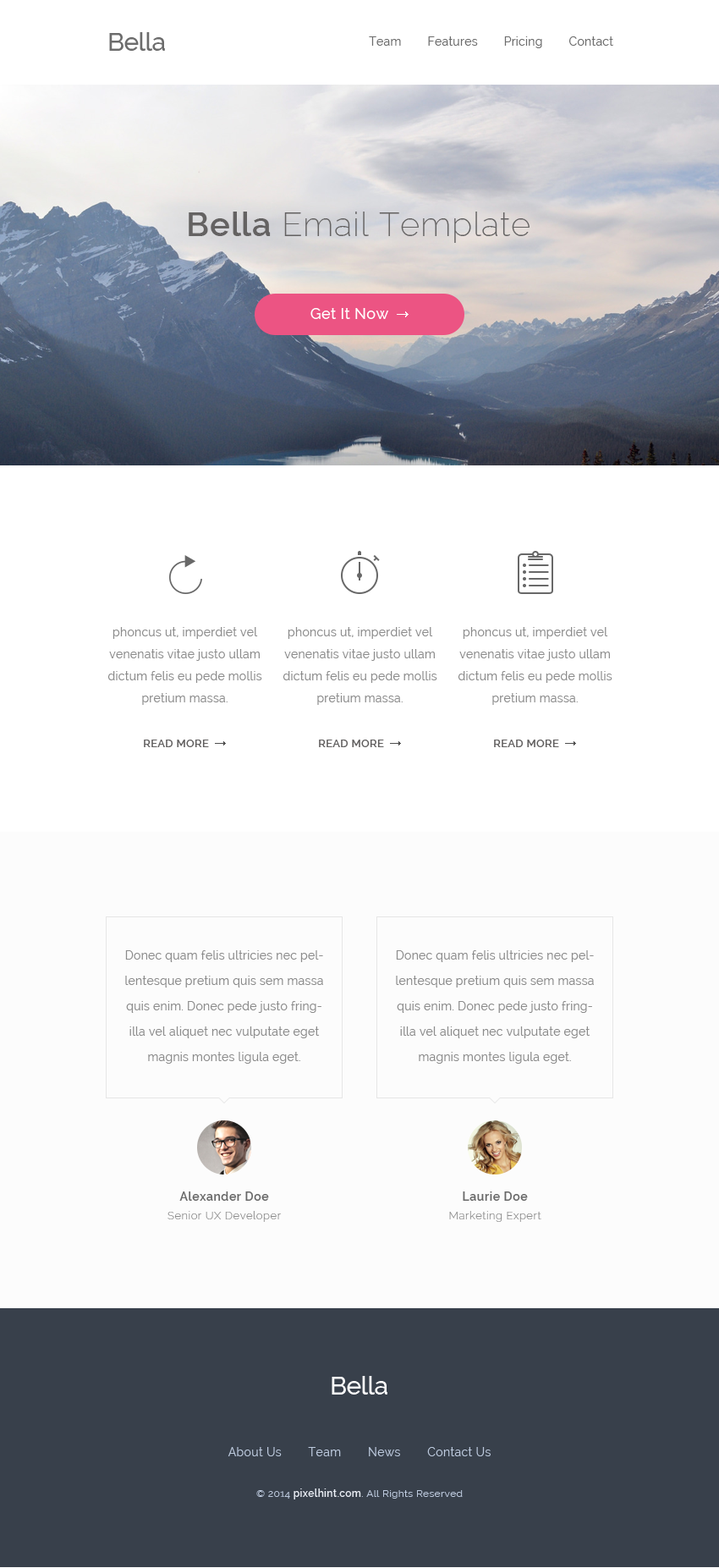
<style>
.page{position:relative;width:719px;height:1568px;background:#fcfcfc}
.page>*{position:absolute;margin:0}
.t1{font:25.4px "Raleway-Medium";letter-spacing:-0.02em;color:#6c6c6c}
.t2{font:11.8px "Raleway";letter-spacing:0.02em;color:#6c6c6c}
.t3{font:33.8px "Raleway-ExtraLight";letter-spacing:0.02em;color:#646262}
.t4{font:33.8px "Raleway-SemiBold";letter-spacing:0.02em;color:#646262}
.t5{font:15.2px "Raleway-Medium";letter-spacing:0.02em;color:#ffffff}
.t6{font:11.8px/22px "Raleway";letter-spacing:0.02em;color:#8c8c8c}
.t7{font:11px "Raleway-SemiBold";letter-spacing:0.02em;color:#615f5f;text-transform:uppercase}
.t8{font:11.8px/25.4px "Raleway";letter-spacing:0.02em;color:#8c8c8c}
.t9{font:11px/18.6px "Raleway-Light";letter-spacing:0.04em;color:#8c8c8c}
.t10{font:11.8px/18.6px "Raleway-SemiBold";letter-spacing:0.04em;color:#686868}
.t11{font:25.4px "Raleway-Medium";letter-spacing:-0.02em;color:#ffffff}
.t12{font:11.8px "Raleway";letter-spacing:0.026em;color:#bcc9dd}
.t13{font:10.2px "Raleway";letter-spacing:0.026em;color:#bcc9dd}
.t14{font:10.2px "Raleway-SemiBold";letter-spacing:0.026em;color:#e9edf4}
</style>
<div class="page">
<p class="t1" style="left:109px;top:32px;width:56px;height:19px">Bella</p>
<p class="t2" style="left:369px;top:36px;width:244px;height:12px">Team        Features        Pricing        Contact</p>
<p class="t3" style="left:189px;top:212px;width:341px;height:31px"><span class="t4">Bella </span>Email Template</p>
<p class="t5" style="left:311px;top:308px;width:78px;height:11px">Get It Now</p>
<p class="t6" style="left:107px;top:627px;width:155px;height:78px;text-align:center">phoncus ut, imperdiet vel venenatis vitae justo ullam dictum felis eu pede mollis pretium massa.</p>
<p class="t6" style="left:283px;top:627px;width:154px;height:78px;text-align:center">phoncus ut, imperdiet vel venenatis vitae justo ullam dictum felis eu pede mollis pretium massa.</p>
<p class="t6" style="left:458px;top:627px;width:155px;height:78px;text-align:center">phoncus ut, imperdiet vel venenatis vitae justo ullam dictum felis eu pede mollis pretium massa.</p>
<p class="t7" style="left:144px;top:740px;width:65px;height:7px">read more</p>
<p class="t7" style="left:319px;top:740px;width:65px;height:7px">read more</p>
<p class="t7" style="left:494px;top:740px;width:65px;height:7px">read more</p>
<p class="t8" style="left:125px;top:950px;width:198px;height:114px;text-align:center">Donec quam felis ultricies nec pellentesque pretium quis sem massa quis enim. Donec pede justo fringilla vel aliquet nec vulputate eget magnis montes ligula eget.</p>
<p class="t8" style="left:396px;top:950px;width:198px;height:114px;text-align:center">Donec quam felis ultricies nec pellentesque pretium quis sem massa quis enim. Donec pede justo fringilla vel aliquet nec vulputate eget magnis montes ligula eget.</p>
<p class="t9" style="left:168px;top:1191px;width:114px;height:31px;text-align:center"><span class="t10">Alexander Doe<br></span>Senior UX Developer</p>
<p class="t9" style="left:449px;top:1191px;width:93px;height:31px;text-align:center"><span class="t10">Laurie Doe<br></span>Marketing Expert</p>
<p class="t11" style="left:332px;top:1376px;width:56px;height:19px">Bella</p>
<p class="t12" style="left:228px;top:1447px;width:263px;height:9px">About Us        Team        News        Contact Us</p>
<p class="t13" style="left:256px;top:1488px;width:207px;height:11px">© 2014 <span class="t14">pixelhint.com</span>. All Rights Reserved</p>
</div>
